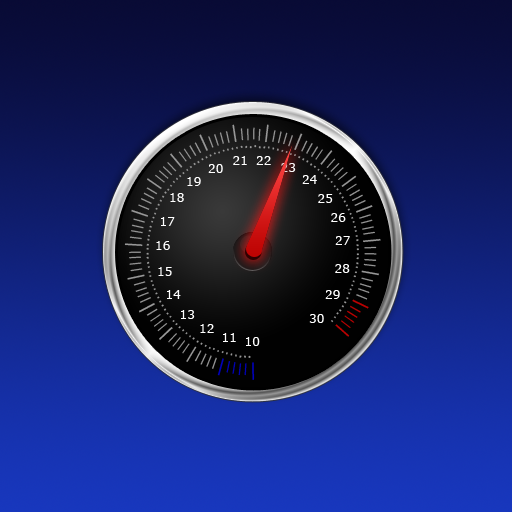
<style>
.page{position:relative;width:512px;height:512px}
.page>*{position:absolute;margin:0}
.t1{font:12px "Verdana";color:#ffffff}
.t2{font:12px "Verdana"}
</style>
<div class="page">
<p class="t1" style="left:233px;top:156px;width:14px;height:9px">21</p>
<p class="t1" style="left:256px;top:156px;width:15px;height:9px">22</p>
<p class="t1" style="left:208px;top:164px;width:15px;height:9px">20</p>
<p class="t2" style="left:281px;top:163px;width:15px;height:9px">23</p>
<p class="t1" style="left:187px;top:177px;width:14px;height:9px">19</p>
<p class="t1" style="left:302px;top:175px;width:15px;height:9px">24</p>
<p class="t1" style="left:170px;top:193px;width:14px;height:9px">18</p>
<p class="t1" style="left:318px;top:194px;width:15px;height:9px">25</p>
<p class="t1" style="left:161px;top:217px;width:14px;height:9px">17</p>
<p class="t1" style="left:331px;top:213px;width:15px;height:9px">26</p>
<p class="t1" style="left:156px;top:241px;width:14px;height:9px">16</p>
<p class="t1" style="left:335px;top:236px;width:15px;height:9px">27</p>
<p class="t1" style="left:158px;top:267px;width:14px;height:9px">15</p>
<p class="t1" style="left:335px;top:264px;width:15px;height:9px">28</p>
<p class="t1" style="left:167px;top:290px;width:14px;height:9px">14</p>
<p class="t1" style="left:325px;top:290px;width:15px;height:9px">29</p>
<p class="t1" style="left:181px;top:310px;width:14px;height:9px">13</p>
<p class="t1" style="left:309px;top:314px;width:15px;height:9px">30</p>
<p class="t1" style="left:200px;top:324px;width:14px;height:9px">12</p>
<p class="t1" style="left:223px;top:333px;width:13px;height:9px">11</p>
<p class="t1" style="left:246px;top:337px;width:14px;height:9px">10</p>
</div>
